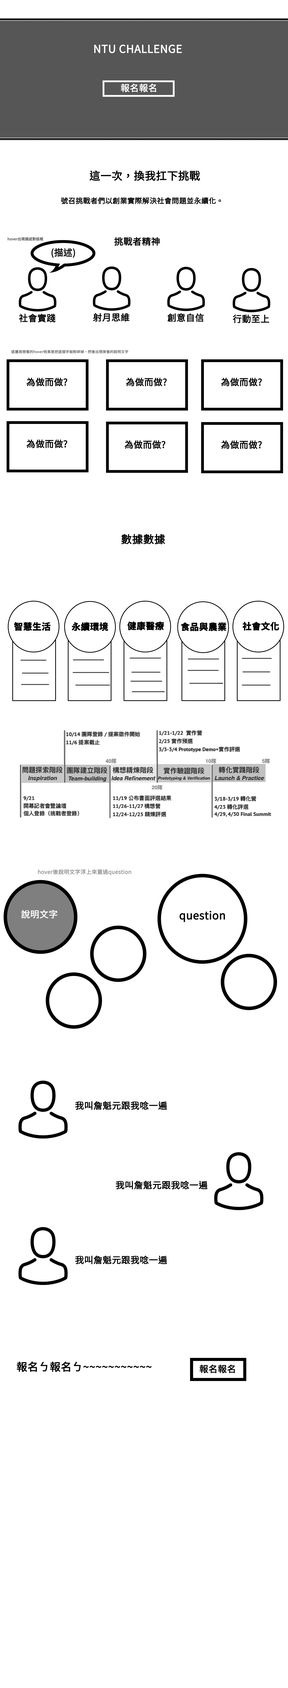
<style>
.page{position:relative;width:288px;height:1688px;background:#ffffff}
.page>*{position:absolute;margin:0}
.t1{font:10.8px "NotoSansCJKtc-Regular";color:#ffffff;font-weight:bold}
.t2{font:9px "NotoSansCJKtc-Regular";color:#ffffff;font-weight:bold}
.t3{font:10.8px "NotoSansCJKtc-Regular";color:#000000;font-weight:bold}
.t4{font:7.2px "NotoSansCJKtc-Regular";color:#000000;font-weight:bold}
.t5{font:3.6px "NotoSansCJKtc-Regular";color:#4c4c4c;font-weight:bold}
.t6{font:9px "NotoSansCJKtc-Regular";color:#000000;font-weight:bold}
.t7{font:3.6px "NotoSansCJKtc-Regular";color:#6e6e6e;font-weight:bold}
.t8{font:5.4px "NotoSansCJKtc-Regular";color:#949494;font-weight:bold}
</style>
<div class="page">
<p class="t1" style="left:94px;top:45px;width:88px;height:8px">NTU CHALLENGE</p>
<p class="t2" style="left:121px;top:84px;width:35px;height:8px">報名報名</p>
<p class="t3" style="left:90px;top:170px;width:110px;height:11px">這一次，換我扛下挑戰</p>
<p class="t4" style="left:61px;top:197px;width:160px;height:7px">號召挑戰者們以創業實際解決社會問題並永續化。</p>
<p class="t5" style="left:8px;top:237px;width:35px;height:4px">hover出現描述對話框</p>
<p class="t6" style="left:114px;top:237px;width:46px;height:9px">挑戰者精神</p>
<p class="t6" style="left:51px;top:248px;width:24px;height:10px">(描述)</p>
<p class="t6" style="left:19px;top:314px;width:37px;height:8px">社會實踐</p>
<p class="t6" style="left:93px;top:313px;width:36px;height:9px">射月思維</p>
<p class="t6" style="left:168px;top:313px;width:36px;height:9px">創意自信</p>
<p class="t6" style="left:233px;top:314px;width:36px;height:9px">行動至上</p>
<p class="t7" style="left:11px;top:350px;width:117px;height:3px">這邊我想像的hover效果是把這個字板粉碎掉，然後出現背後的說明文字</p>
<p class="t6" style="left:26px;top:378px;width:41px;height:8px">為做而做?</p>
<p class="t6" style="left:126px;top:378px;width:41px;height:8px">為做而做?</p>
<p class="t6" style="left:221px;top:378px;width:41px;height:8px">為做而做?</p>
<p class="t6" style="left:26px;top:439px;width:41px;height:9px">為做而做?</p>
<p class="t6" style="left:124px;top:440px;width:41px;height:9px">為做而做?</p>
<p class="t6" style="left:221px;top:440px;width:41px;height:9px">為做而做?</p>
<p class="t3" style="left:121px;top:534px;width:44px;height:10px">數據數據</p>
<p class="t8" style="left:38px;top:869px;width:93px;height:6px">hover後說明文字浮上來蓋過question</p>
<p class="t2" style="left:21px;top:909px;width:36px;height:9px">說明文字</p>
<p class="t3" style="left:180px;top:910px;width:45px;height:12px">question</p>
<p class="t6" style="left:75px;top:1101px;width:92px;height:9px">我叫詹魁元跟我唸一遍</p>
<p class="t6" style="left:116px;top:1180px;width:92px;height:9px">我叫詹魁元跟我唸一遍</p>
<p class="t6" style="left:75px;top:1255px;width:92px;height:9px">我叫詹魁元跟我唸一遍</p>
<p class="t3" style="left:17px;top:1361px;width:135px;height:11px">報名ㄅ報名ㄅ~~~~~~~~~~~</p>
<p class="t6" style="left:200px;top:1364px;width:35px;height:9px">報名報名</p>
</div>
